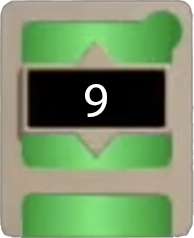
<style>
.page{position:relative;width:194px;height:238px}
.page>*{position:absolute;margin:0}
.t1{font:50px "MyriadPro-Regular";color:#ffffff}
</style>
<div class="page">
<p class="t1" style="left:85px;top:84px;width:22px;height:33px">9</p>
</div>
